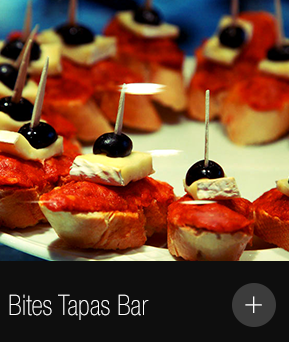
<style>
.page{position:relative;width:289px;height:342px;background:#0e0e0e}
.page>*{position:absolute;margin:0}
.t1{font:28.3px "HelveticaNeueLTPro-ThCn";color:#ffffff}
.t2{font:32.5px "HelveticaNeueLTPro-ThEx";color:#ffffff}
</style>
<div class="page">
<p class="t1" style="left:9px;top:294px;width:140px;height:26px">Bites Tapas Bar</p>
<p class="t2" style="left:245px;top:296px;width:17px;height:17px">+</p>
</div>
